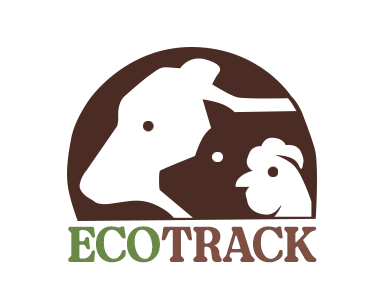
<style>
.page{position:relative;width:384px;height:308px;background:#ffffff}
.page>*{position:absolute;margin:0}
.t1{font:62px "MilkyVintage";color:#7e5044;text-transform:uppercase}
.t2{font:62px "MilkyVintage";color:#6b8946;text-transform:uppercase}
</style>
<div class="page">
<p class="t1" style="left:68px;top:226px;width:249px;height:37px"><span class="t2">Eco</span>Track</p>
</div>
